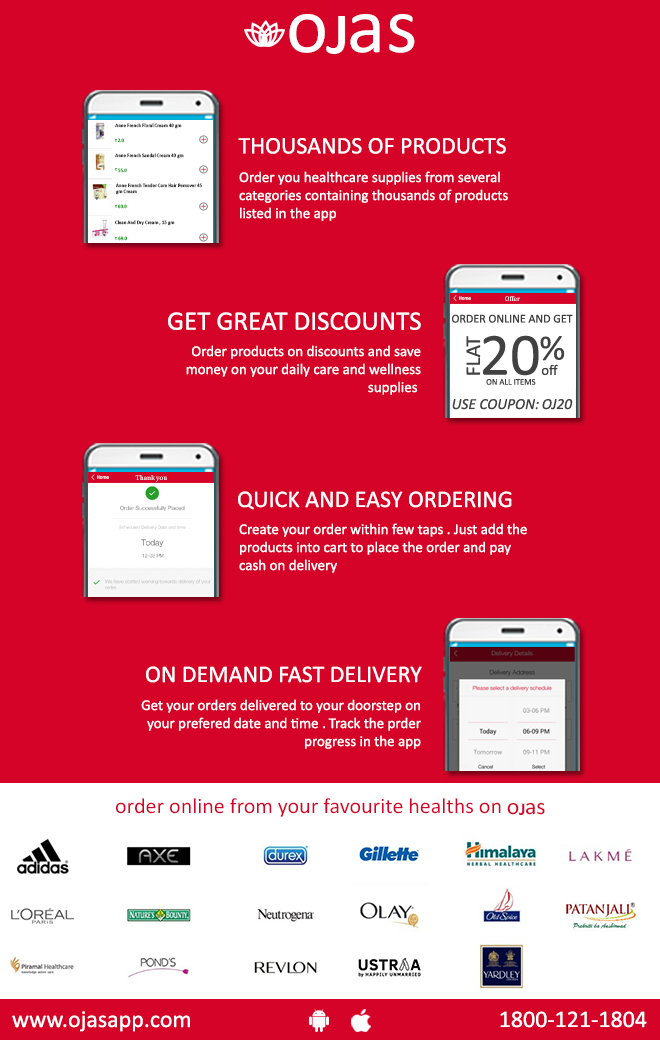
<style>
.page{position:relative;width:660px;height:1040px;background:#d50328}
.page>*{position:absolute;margin:0}
.t1{font:80px "Calibri";color:#ffffff}
.t2{font:5px "Calibri";color:#414141}
.t3{font:5px "Calibri";color:#289f2b}
.t4{font:24px "Calibri";color:#ffffff}
.t5{font:5px "Calibri"}
.t6{font:15px "Calibri";color:#ffffff}
.t7{font:7px "Cambria"}
.t8{font:27px "Calibri";color:#ffffff}
.t9{font:12px "Calibri";color:#414141}
.t10{font:21.1px "Calibri";color:#414141}
.t11{font:60.2px "Calibri";color:#414141}
.t12{font:36px "Calibri";color:#414141}
.t13{font:14.6px "Calibri";color:#414141}
.t14{font:8.7px "Calibri";color:#414141}
.t15{font:15.4px "Calibri-Italic";color:#414141}
.t16{font:21.9px "Calibri";color:#d50328}
.t17{font:23.3px "Calibri";color:#d50328}
.t18{font:23.9px "Calibri";color:#ffffff}
</style>
<div class="page">
<p class="t1" style="left:289px;top:14px;width:36px;height:39px">o</p>
<p class="t1" style="left:350px;top:14px;width:65px;height:39px">as</p>
<p class="t2" style="left:115px;top:123px;width:67px;height:6px">Anne French Floral Cream 40 gm</p>
<p class="t3" style="left:117px;top:138px;width:7px;height:5px">2.0</p>
<p class="t4" style="left:238px;top:138px;width:268px;height:16px">THOUSANDS OF PRODUCTS</p>
<p class="t2" style="left:115px;top:153px;width:69px;height:6px">Anne French Sandal Cream 40 gm</p>
<p class="t5" style="left:118px;top:168px;width:9px;height:5px">55.0</p>
<p class="t6" style="left:239px;top:171px;width:269px;height:50px;text-align:right">Order you healthcare supplies from several<br> categories containing thousands of products<br> listed in the app</p>
<p class="t2" style="left:115px;top:183px;width:87px;height:12px;text-align:right">Anne French Tender Care Hair Remover 45<br>gm Cream</p>
<p class="t3" style="left:118px;top:204px;width:9px;height:5px">60.0</p>
<p class="t2" style="left:115px;top:220px;width:60px;height:6px">Clean And Dry Cream , 15 gm</p>
<p class="t3" style="left:118px;top:236px;width:9px;height:5px">69.0</p>
<p class="t5" style="left:459px;top:296px;width:12px;height:4px">Home</p>
<p class="t7" style="left:505px;top:296px;width:15px;height:5px">Offer</p>
<p class="t8" style="left:168px;top:312px;width:253px;height:18px">GET GREAT DISCOUNTS</p>
<p class="t9" style="left:452px;top:314px;width:121px;height:9px">ORDER ONLINE AND GET</p>
<p class="t10" style="left:466px;top:336px;width:15px;height:39px;rotate:-90deg">FLAT</p>
<p class="t11" style="left:483px;top:335px;width:56px;height:41px">20</p>
<p class="t12" style="left:540px;top:336px;width:25px;height:25px">%</p>
<p class="t6" style="left:186px;top:345px;width:235px;height:50px">Order products on discounts and save <br>money on your daily care and wellness<br> supplies</p>
<p class="t13" style="left:541px;top:364px;width:17px;height:12px">off</p>
<p class="t14" style="left:486px;top:379px;width:50px;height:6px">ON ALL ITEMS</p>
<p class="t15" style="left:452px;top:399px;width:87px;height:11px">:USE COUPON</p>
<p class="t15" style="left:542px;top:399px;width:31px;height:11px">OJ20</p>
<p class="t5" style="left:97px;top:475px;width:12px;height:4px">Home</p>
<p class="t7" style="left:135px;top:475px;width:32px;height:7px">Thank you</p>
<p class="t4" style="left:238px;top:491px;width:274px;height:19px">QUICK AND EASY ORDERING</p>
<p class="t6" style="left:239px;top:523px;width:288px;height:50px;text-align:right">Create your order within few taps . Just add the<br>products into cart to place the order and pay<br>cash on delivery</p>
<p class="t4" style="left:146px;top:666px;width:276px;height:17px">ON DEMAND FAST DELIVERY</p>
<p class="t6" style="left:141px;top:699px;width:280px;height:50px">Get your orders delivered to your doorstep on<br>your prefered date and time   Track the prder<br>progress in the app</p>
<p class="t6" style="left:323px;top:726px;width:2px;height:3px">.</p>
<p class="t16" style="left:116px;top:798px;width:385px;height:19px">order online from your favourite healths on</p>
<p class="t17" style="left:507px;top:802px;width:12px;height:13px">o</p>
<p class="t17" style="left:526px;top:802px;width:19px;height:13px">as</p>
<p class="t18" style="left:12px;top:1011px;width:178px;height:21px">www.ojasapp.com</p>
<p class="t18" style="left:500px;top:1011px;width:147px;height:17px">1800-121-1804</p>
</div>
